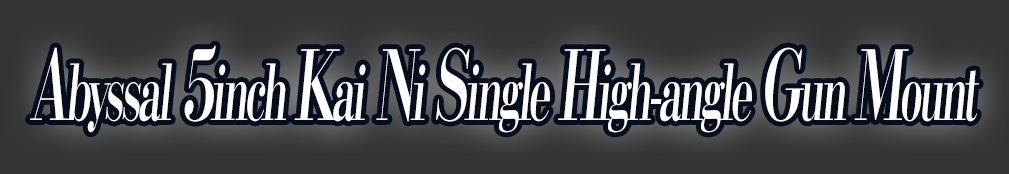
<style>
.page{position:relative;width:1009px;height:174px;background:#333333}
.page>*{position:absolute;margin:0}
.t1{font:76.8px "KochoStd-Heavy";letter-spacing:-0.08em;color:#ffffff;font-style:italic;scale:0.54 1}
.t2{font:96px "KochoStd-Heavy";letter-spacing:-0.08em;color:#ffffff;font-style:italic;scale:0.54 1}
</style>
<div class="page">
<p class="t1" style="left:30px;top:45px;width:949px;height:88px"><span class="t2">A</span>byssal<span class="t2"> 5</span>inch <span class="t2">K</span>ai<span class="t2"> N</span>i <span class="t2">S</span>ingle <span class="t2">H</span>igh-angle <span class="t2">G</span>un <span class="t2">M</span>ount</p>
</div>
